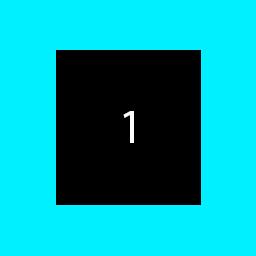
<style>
.page{position:relative;width:256px;height:256px;background:#00f0ff}
.page>*{position:absolute;margin:0}
.t1{font:48px "MyriadPro-Regular";color:#ffffff}
</style>
<div class="page">
<p class="t1" style="left:123px;top:111px;width:11px;height:32px">1</p>
</div>
